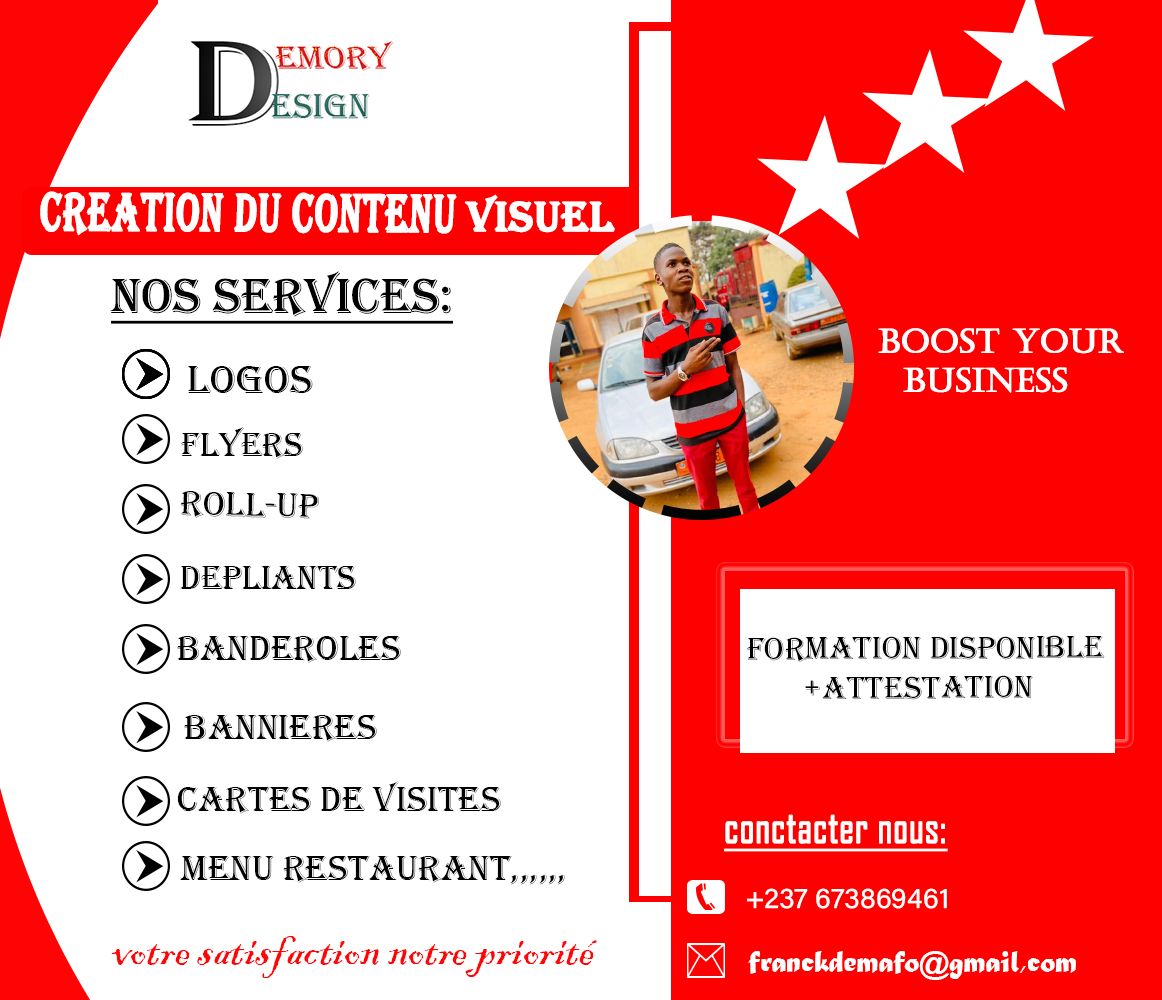
<style>
.page{position:relative;width:1162px;height:1000px;background:#ffffff}
.page>*{position:absolute;margin:0}
.t1{font:55.6px "Algerian";color:#ffffff;font-weight:bold;scale:0.67 1}
.t2{font:55.6px "Algerian";color:#ffffff;font-weight:bold;text-decoration:underline;scale:0.67 1}
.t3{font:43.2px "Algerian";color:#ffffff;font-weight:bold}
.t4{font:50.3px "Algerian";color:#000000;text-decoration:underline}
.t5{font:32.6px "Castellar";color:#ffffff;font-weight:bold}
.t6{font:41.2px "Algerian";color:#000000}
.t7{font:34.2px "Algerian";color:#000000}
.t8{font:36px "Algerian";color:#000000}
.t9{font:33px "Algerian";color:#000000}
.t10{font:44px "AgencyFB-Reg";color:#ffffff;font-weight:bold;text-decoration:underline;scale:0.88 1}
.t11{font:28.6px "AcuminConcept-Regular";color:#ffffff}
.t12{font:48.7px "BlackadderITC-Regular";color:#ff0505}
.t13{font:30.5px "MaturaMTScriptCapitals";color:#ffffff}
</style>
<div class="page">
<p class="t1" style="left:40px;top:191px;width:417px;height:45px">creation du contenu<span class="t2"> VVVVVVVVvisuel</span></p>
<p class="t3" style="left:464px;top:194px;width:151px;height:39px">VISUEL</p>
<p class="t4" style="left:110px;top:271px;width:343px;height:53px">NOS SERVICES:</p>
<p class="t5" style="left:878px;top:328px;width:246px;height:65px">boost your<br>  business</p>
<p class="t6" style="left:188px;top:366px;width:125px;height:27px">Logos</p>
<p class="t7" style="left:181px;top:427px;width:122px;height:32px">Flyers</p>
<p class="t8" style="left:180px;top:491px;width:139px;height:28px;rotate:1deg">Roll-up</p>
<p class="t7" style="left:180px;top:566px;width:176px;height:23px">Depliants</p>
<p class="t8" style="left:177px;top:636px;width:224px;height:27px">Banderoles</p>
<p class="t9" style="left:747px;top:635px;width:358px;height:65px">formation disponible<br>       +ATTESTATION</p>
<p class="t8" style="left:184px;top:715px;width:193px;height:27px">Bannieres</p>
<p class="t8" style="left:177px;top:781px;width:324px;height:33px">cartes de visites</p>
<p class="t10" style="left:724px;top:814px;width:224px;height:38px">conctacter nous:</p>
<p class="t8" style="left:180px;top:856px;width:385px;height:29px">menu restaurant,,,,,,</p>
<p class="t11" style="left:747px;top:888px;width:200px;height:21px">+237 673869461</p>
<p class="t12" style="left:111px;top:936px;width:486px;height:42px">votre satisfaction notre priorité</p>
<p class="t13" style="left:748px;top:951px;width:328px;height:29px">franckdemafo@gmail,com</p>
</div>
